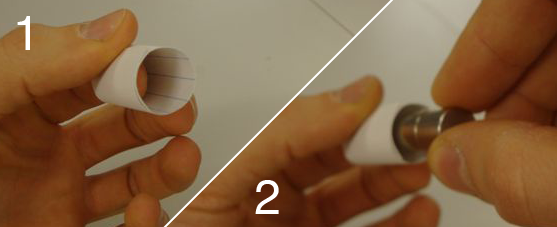
<style>
.page{position:relative;width:557px;height:227px}
.page>*{position:absolute;margin:0}
.t1{font:48px "Helvetica";color:#ffffff}
</style>
<div class="page">
<p class="t1" style="left:17px;top:16px;width:13px;height:34px">1</p>
<p class="t1" style="left:255px;top:180px;width:24px;height:34px">2</p>
</div>
